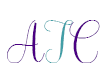
<style>
.page{position:relative;width:108px;height:79px;background:#ffffff}
.page>*{position:absolute;margin:0}
.t1{font:50px "Balqis";letter-spacing:0.05em;color:#4b0082}
.t2{font:50px "Balqis";letter-spacing:0.05em;color:#429ea6}
</style>
<div class="page">
<p class="t1" style="left:7px;top:20px;width:93px;height:43px">A<span class="t2">J</span>C</p>
</div>
